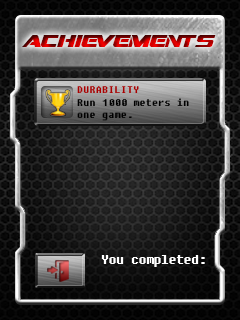
<style>
.page{position:relative;width:240px;height:320px}
.page>*{position:absolute;margin:0}
.t1{font:17px "DreamMMA"}
.t2{font:10px "Fixedsys";color:#aa0000}
.t3{font:10px "Fixedsys";color:#000000}
.t4{font:12px "Fixedsys";color:#ffffff}
</style>
<div class="page">
<p class="t1" style="left:22px;top:35px;width:194px;height:12px">achievements</p>
<p class="t2" style="left:77px;top:86px;width:62px;height:7px">DURABILITY</p>
<p class="t3" style="left:77px;top:98px;width:112px;height:23px">Run 1000 meters in<br>one game.</p>
<p class="t4" style="left:101px;top:255px;width:104px;height:12px">You completed:</p>
</div>
